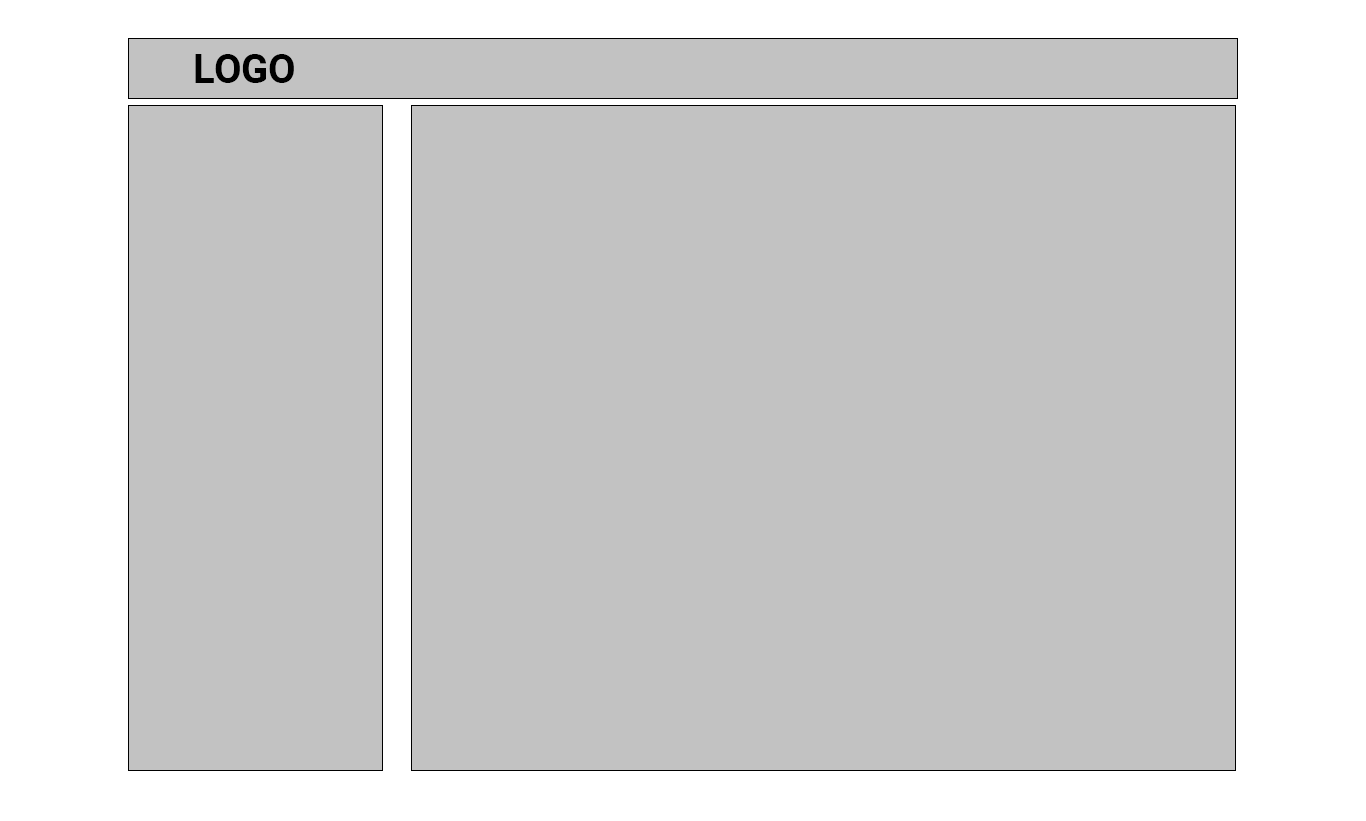
<style>
.page{position:relative;width:1366px;height:821px;background:#c2c2c2}
.page>*{position:absolute;margin:0}
.t1{font:40px "Roboto-Bold";color:#000000}
</style>
<div class="page">
<p class="t1" style="left:195px;top:54px;width:99px;height:29px">LOGO</p>
</div>
